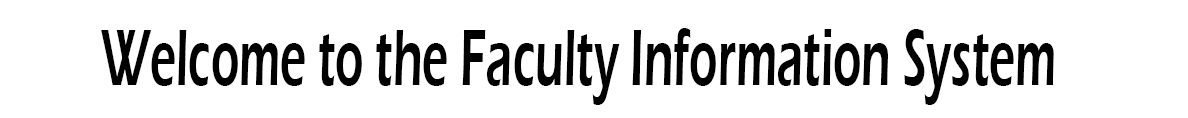
<style>
.page{position:relative;width:1188px;height:118px;background:#ffffff}
.page>*{position:absolute;margin:0}
.t1{font:82.7px "ErasITC-Demi";color:#000000;scale:0.56 1}
</style>
<div class="page">
<p class="t1" style="left:101px;top:28px;width:953px;height:77px">Welcome to the Faculty Information System</p>
</div>
